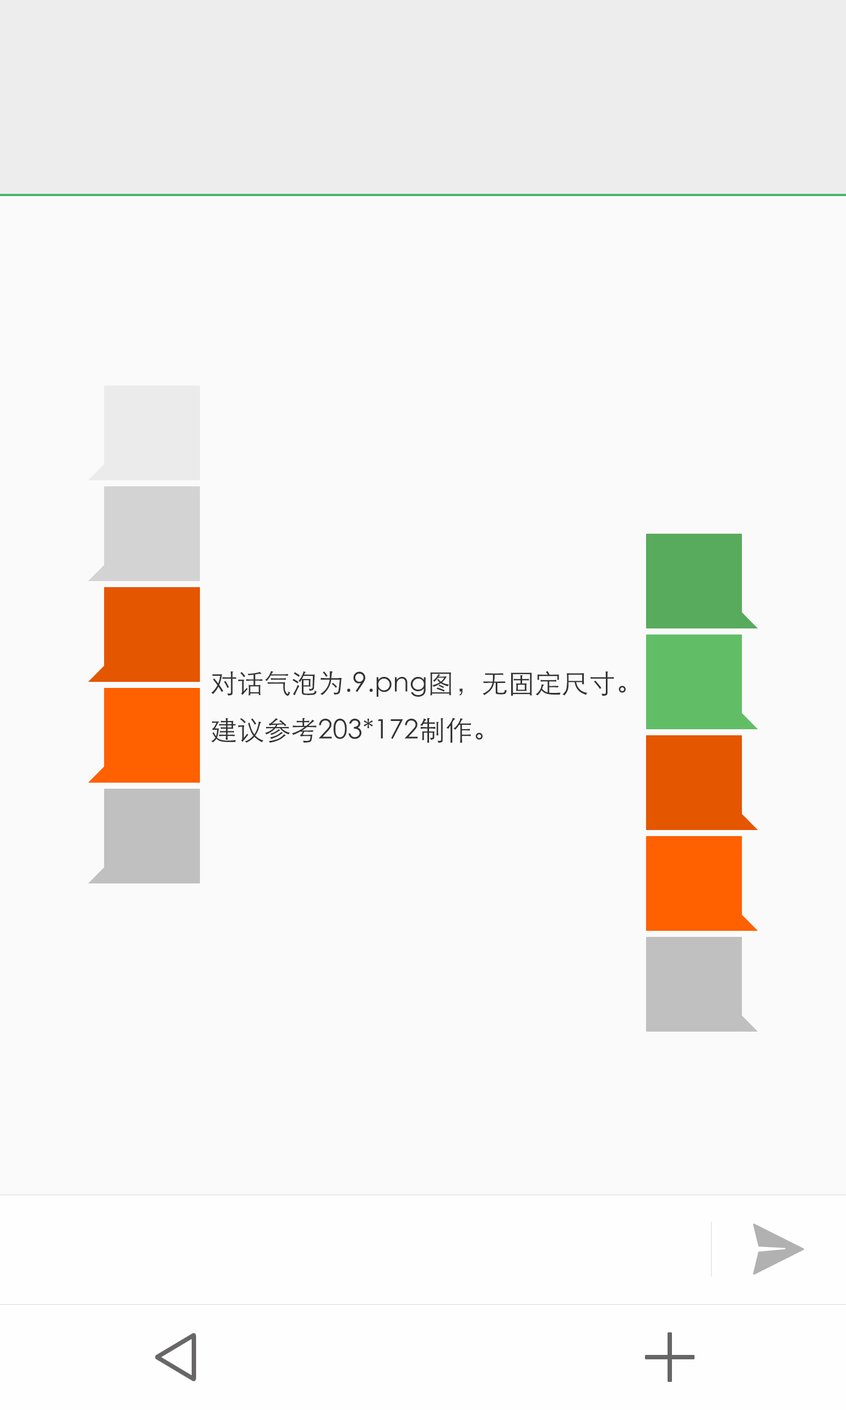
<style>
.page{position:relative;width:846px;height:1410px;background:#fafafa}
.page>*{position:absolute;margin:0}
.t1{font:26.9px "STXihei";color:#333333}
</style>
<div class="page">
<p class="t1" style="left:211px;top:671px;width:415px;height:72px">对话气泡为.9.png图，无固定尺寸。<br>建议参考203*172制作。</p>
</div>
